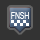
<style>
.page{position:relative;width:40px;height:40px;background:#333333}
.page>*{position:absolute;margin:0}
.t1{font:9px "MicrosoftSansSerif";color:#fefefe;scale:0.75 1}
</style>
<div class="page">
<p class="t1" style="left:11px;top:12px;width:18px;height:7px">FNSH</p>
</div>
